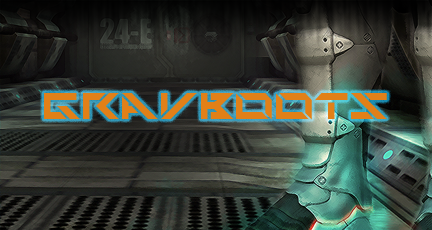
<style>
.page{position:relative;width:432px;height:230px}
.page>*{position:absolute;margin:0}
.t1{font:52.4px "TechnoHideo";color:#e18018}
</style>
<div class="page">
<p class="t1" style="left:44px;top:93px;width:343px;height:27px">GravBoots</p>
</div>
